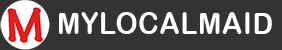
<style>
.page{position:relative;width:282px;height:50px;background:#333333}
.page>*{position:absolute;margin:0}
.t1{font:30.2px "ArialRoundedMTBold";letter-spacing:0.025em;color:#ffffff;font-variant:small-caps;scale:0.93 1}
</style>
<div class="page">
<p class="t1" style="left:59px;top:12px;width:213px;height:22px">MYLOCALMAID</p>
</div>
